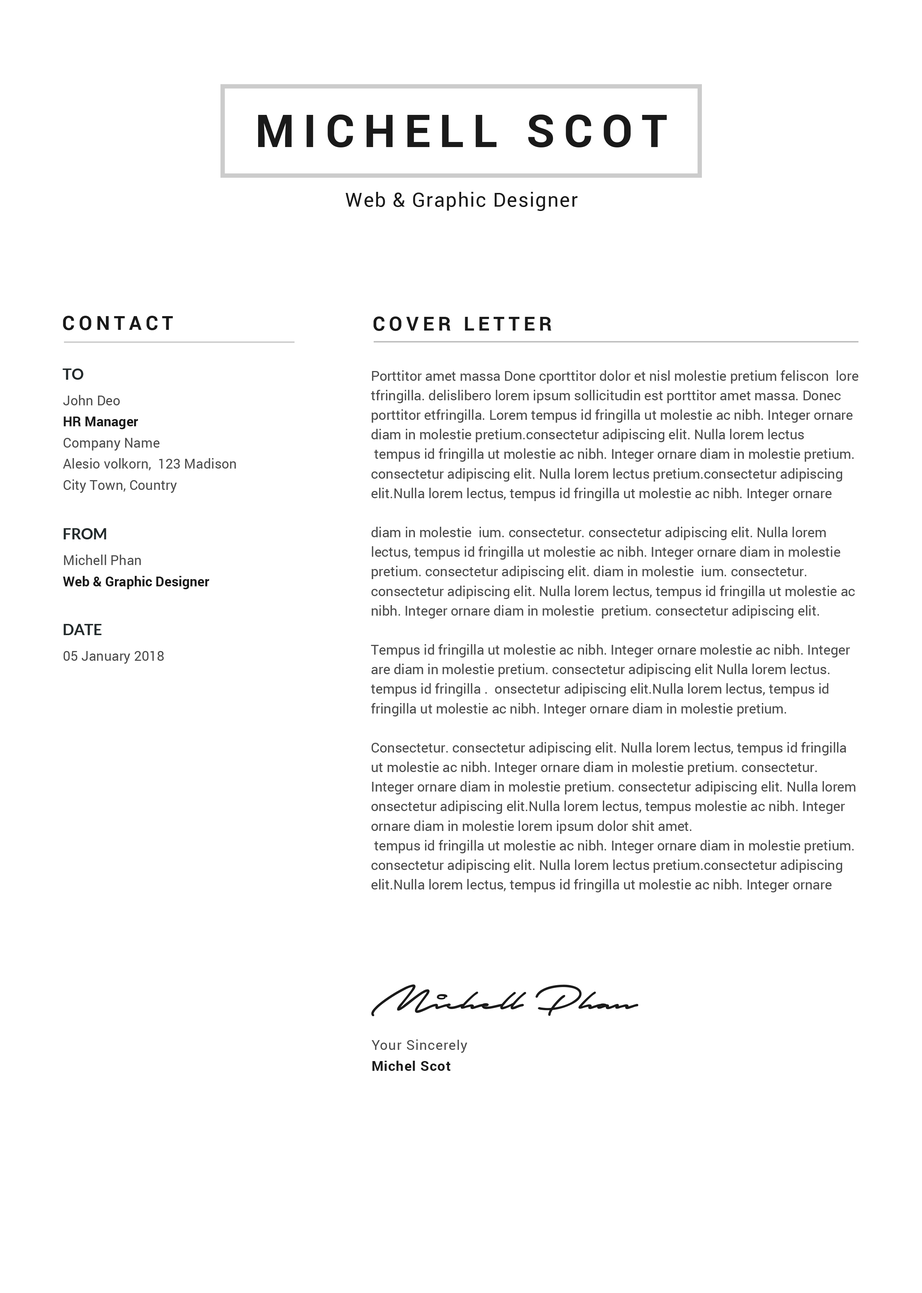
<style>
.page{position:relative;width:922px;height:1293px;background:#ffffff}
.page>*{position:absolute;margin:0}
.t1{font:45.2px "Roboto-Bold";letter-spacing:0.2em;color:#1a1a1a;text-transform:uppercase}
.t2{font:19.6px "Roboto-Regular";letter-spacing:0.05em;color:#1a1a1a}
.t3{font:19.6px "Roboto-Bold";letter-spacing:0.2em;color:#1a1a1a;text-transform:uppercase}
.t4{font:15.1px "Lato-Bold";color:#242b2c;text-transform:uppercase}
.t5{font:13.6px/19.6px "Roboto-Regular";color:#4c4c4c}
.t6{font:13.6px/21.1px "Roboto-Regular";color:#4c4c4c}
.t7{font:13.6px/21.1px "Roboto-Bold";color:#1a1a1a}
.t8{font:13.6px "Roboto-Regular";color:#4c4c4c}
.t9{font:13.5px/21px "Roboto-Regular";letter-spacing:0.05em;color:#4c4c4c}
.t10{font:13.5px/21px "Roboto-Bold";letter-spacing:0.05em;color:#1a1a1a}
</style>
<div class="page">
<p class="t1" style="left:258px;top:115px;width:409px;height:32px">Michell SCOT</p>
<p class="t2" style="left:345px;top:192px;width:233px;height:19px">Web &amp; Graphic Designer</p>
<p class="t3" style="left:63px;top:316px;width:110px;height:14px">CONTACT</p>
<p class="t3" style="left:373px;top:317px;width:178px;height:14px">COVER LETTER</p>
<p class="t4" style="left:63px;top:369px;width:20px;height:11px">To</p>
<p class="t5" style="left:371px;top:370px;width:487px;height:523px">Porttitor amet massa Done cporttitor dolor et nisl molestie pretium feliscon  lore  tfringilla. delislibero lorem ipsum sollicitudin est porttitor amet massa. Donec porttitor etfringilla. Lorem tempus id fringilla ut molestie ac nibh. Integer ornare diam in molestie pretium.consectetur adipiscing elit. Nulla lorem lectus<br> tempus id fringilla ut molestie ac nibh. Integer ornare diam in molestie pretium. consectetur adipiscing elit. Nulla lorem lectus pretium.consectetur adipiscing elit.Nulla lorem lectus, tempus id fringilla ut molestie ac nibh. Integer ornare <br><br>diam in molestie  ium. consectetur. consectetur adipiscing elit. Nulla lorem lectus, tempus id fringilla ut molestie ac nibh. Integer ornare diam in molestie  pretium. consectetur adipiscing elit. diam in molestie  ium. consectetur. consectetur adipiscing elit. Nulla lorem lectus, tempus id fringilla ut molestie ac nibh. Integer ornare diam in molestie  pretium. consectetur adipiscing elit.<br><br>Tempus id fringilla ut molestie ac nibh. Integer ornare molestie ac nibh. Integer  are diam in molestie pretium. consectetur adipiscing elit Nulla lorem lectus.  tempus id fringilla .  onsectetur adipiscing elit.Nulla lorem lectus, tempus id fringilla ut molestie ac nibh. Integer ornare diam in molestie pretium. <br><br>Consectetur. consectetur adipiscing elit. Nulla lorem lectus, tempus id fringilla ut molestie ac nibh. Integer ornare diam in molestie pretium. consectetur. Integer ornare diam in molestie pretium. consectetur adipiscing elit. Nulla lorem  onsectetur adipiscing elit.Nulla lorem lectus, tempus molestie ac nibh. Integer ornare diam in molestie lorem ipsum dolor shit amet.<br> tempus id fringilla ut molestie ac nibh. Integer ornare diam in molestie pretium. consectetur adipiscing elit. Nulla lorem lectus pretium.consectetur adipiscing elit.Nulla lorem lectus, tempus id fringilla ut molestie ac nibh. Integer ornare</p>
<p class="t6" style="left:63px;top:395px;width:173px;height:98px">John Deo<br><span class="t7">HR Manager<br></span>Company Name<br>Alesio volkorn,  123 Madison<br>City Town, Country</p>
<p class="t4" style="left:64px;top:528px;width:42px;height:12px">From</p>
<p class="t7" style="left:63px;top:555px;width:146px;height:34px"><span class="t6">Michell Phan<br></span>Web &amp; Graphic Designer</p>
<p class="t4" style="left:64px;top:624px;width:38px;height:11px">Date</p>
<p class="t8" style="left:64px;top:651px;width:100px;height:13px">05 January 2018</p>
<p class="t9" style="left:372px;top:1040px;width:95px;height:31px">Your Sincerely<br><span class="t10">Michel Scot</span></p>
</div>
